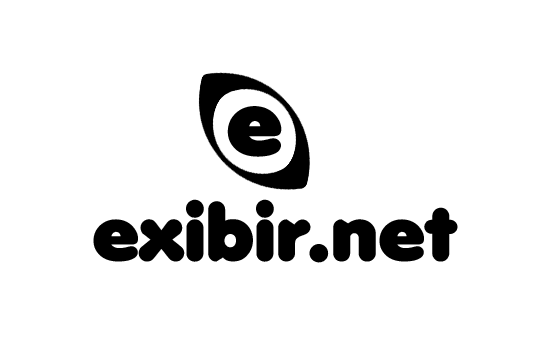
<style>
.page{position:relative;width:550px;height:350px;background:#ffffff}
.page>*{position:absolute;margin:0}
.t1{font:91.4px "Debussy";color:#000000}
.t2{font:76.2px "Debussy";color:#000000}
</style>
<div class="page">
<p class="t1" style="left:227px;top:106px;width:55px;height:51px">e</p>
<p class="t2" style="left:93px;top:199px;width:365px;height:64px">exibir.net</p>
</div>
